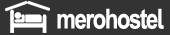
<style>
.page{position:relative;width:170px;height:35px;background:#333333}
.page>*{position:absolute;margin:0}
.t1{font:27.5px "Arial-BoldMT";letter-spacing:-0.06em;color:#ffffff;scale:0.8 1}
</style>
<div class="page">
<p class="t1" style="left:57px;top:8px;width:107px;height:21px">merohostel</p>
</div>
